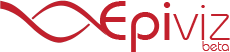
<style>
.page{position:relative;width:230px;height:52px;background:#ffffff}
.page>*{position:absolute;margin:0}
.t1{font:56px "BauhausITCbyBT-Medium";color:#c2202c;scale:1.05 1}
.t2{font:56px "BauhausITCbyBT-Light";color:#c2202c;scale:1.05 1}
.t3{font:14px "BauhausITCbyBT-Light";color:#c2202c}
</style>
<div class="page">
<p class="t1" style="left:99px;top:1px;width:131px;height:51px">Epi<span class="t2">viz</span></p>
<p class="t3" style="left:202px;top:41px;width:27px;height:10px">beta</p>
</div>
